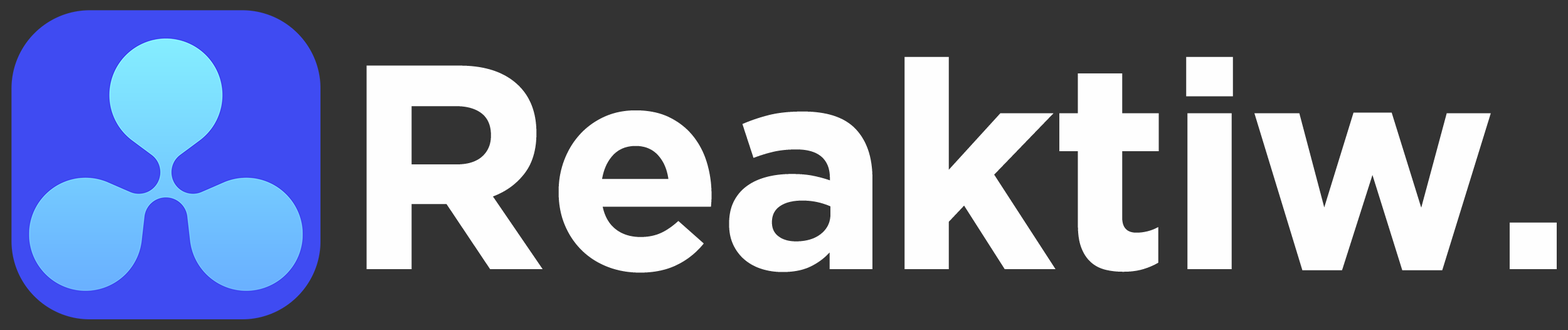
<style>
.page{position:relative;width:1568px;height:330px;background:#333333}
.page>*{position:absolute;margin:0}
.t1{font:290.4px "Gotham-Bold";letter-spacing:-0.02em;color:#fefefe}
</style>
<div class="page">
<p class="t1" style="left:366px;top:56px;width:1191px;height:217px">Reaktiw.</p>
</div>
